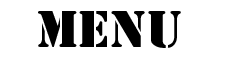
<style>
.page{position:relative;width:226px;height:60px;background:#ffffff}
.page>*{position:absolute;margin:0}
.t1{font:48px "StencilStd";color:#000000}
</style>
<div class="page">
<p class="t1" style="left:38px;top:11px;width:143px;height:37px">menu</p>
</div>
